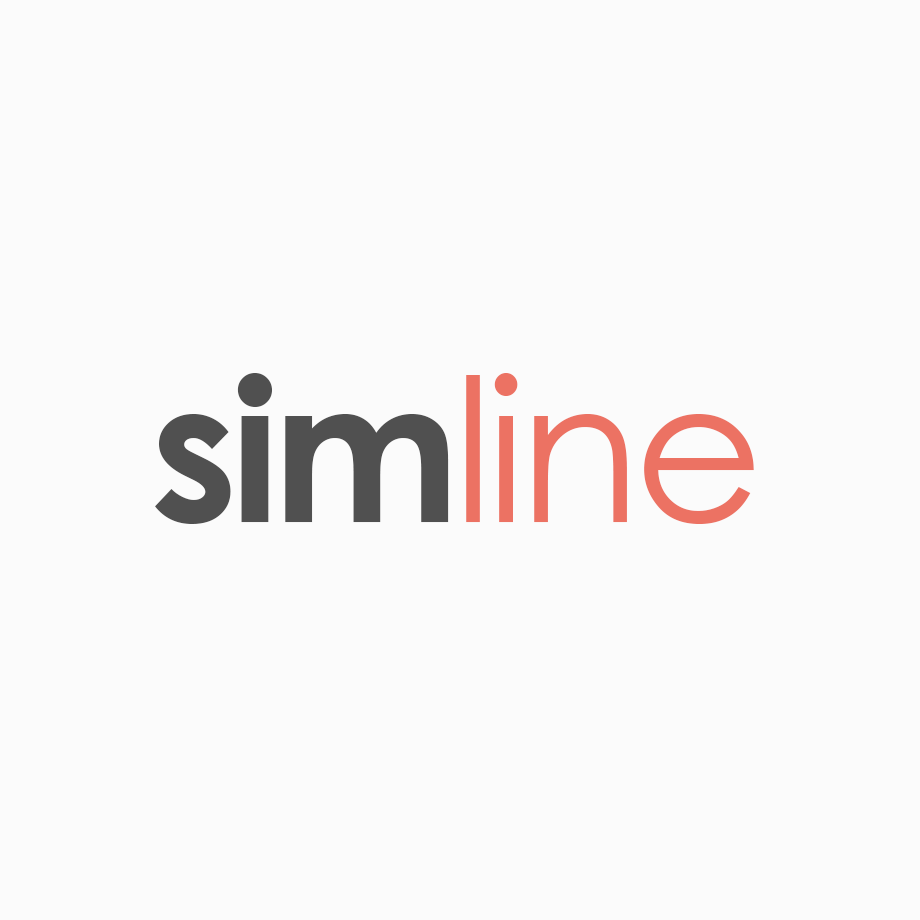
<style>
.page{position:relative;width:920px;height:920px;background:#fbfbfb}
.page>*{position:absolute;margin:0}
.t1{font:200px "CenturyGothic";letter-spacing:-0.035em;color:#ec7263}
.t2{font:200px "CenturyGothic-Bold";letter-spacing:-0.035em;color:#505050}
</style>
<div class="page">
<p class="t1" style="left:155px;top:373px;width:599px;height:151px"><span class="t2">sim</span>line</p>
</div>
